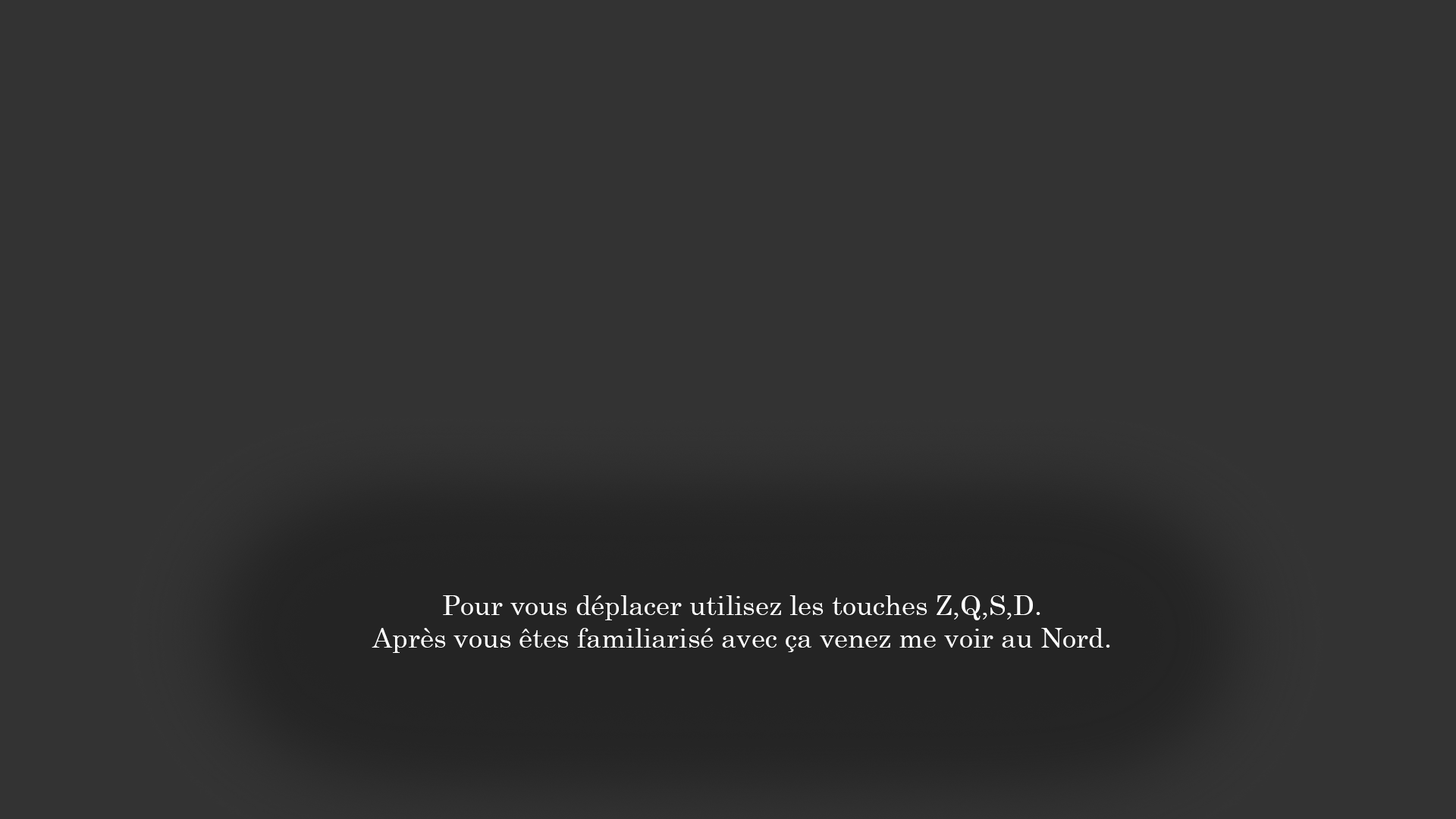
<style>
.page{position:relative;width:1456px;height:819px;background:#333333}
.page>*{position:absolute;margin:0}
.t1{font:27.3px "Century";color:#ffffff}
</style>
<div class="page">
<p class="t1" style="left:372px;top:595px;width:738px;height:58px;text-align:center">Pour vous déplacer utilisez les touches Z,Q,S,D.<br>Après vous êtes familiarisé avec ça venez me voir au Nord.</p>
</div>
